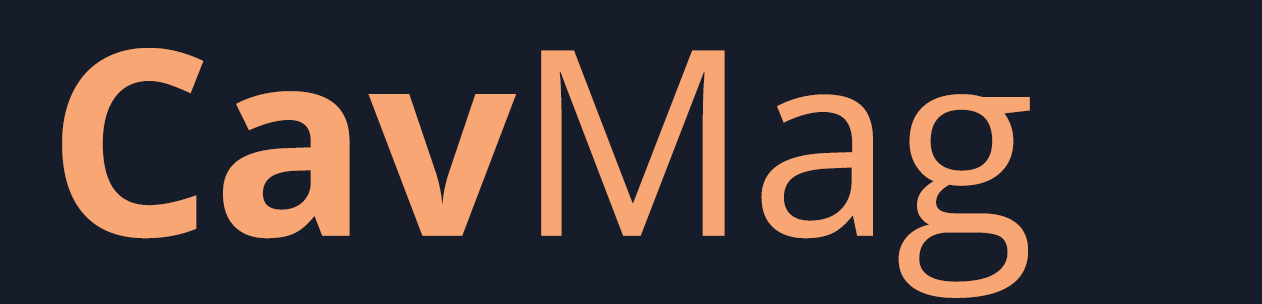
<style>
.page{position:relative;width:1262px;height:304px;background:#161c2a}
.page>*{position:absolute;margin:0}
.t1{font:259px "OpenSans-Bold";color:#f8a674}
.t2{font:259px "OpenSans";color:#f8a674}
</style>
<div class="page">
<p class="t1" style="left:62px;top:48px;width:968px;height:250px">Cav<span class="t2">Mag</span></p>
</div>
